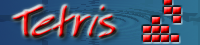
<style>
.page{position:relative;width:200px;height:45px}
.page>*{position:absolute;margin:0}
.t1{font:59.8px "EspecialKay"}
</style>
<div class="page">
<p class="t1" style="left:13px;top:5px;width:103px;height:33px">Tetris</p>
</div>
